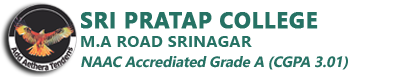
<style>
.page{position:relative;width:402px;height:77px;background:#ffffff}
.page>*{position:absolute;margin:0}
.t1{font:15px/19.5px "SegoeUI-Bold";letter-spacing:-0.02em;color:#267264;font-style:italic}
.t2{font:22px/19.5px "SegoeUI-Bold";letter-spacing:0.02em;color:#267264;font-weight:bold}
.t3{font:16px/19.5px "SegoeUI-Bold";letter-spacing:0.02em;color:#267264}
</style>
<div class="page">
<p class="t1" style="left:81px;top:12px;width:267px;height:58px"><span class="t2">SRI PRATAP COLLEGE<br></span><span class="t3">M.A ROAD SRINAGAR<br></span>NAAC Accrediated Grade A (CGPA 3.01)</p>
</div>
